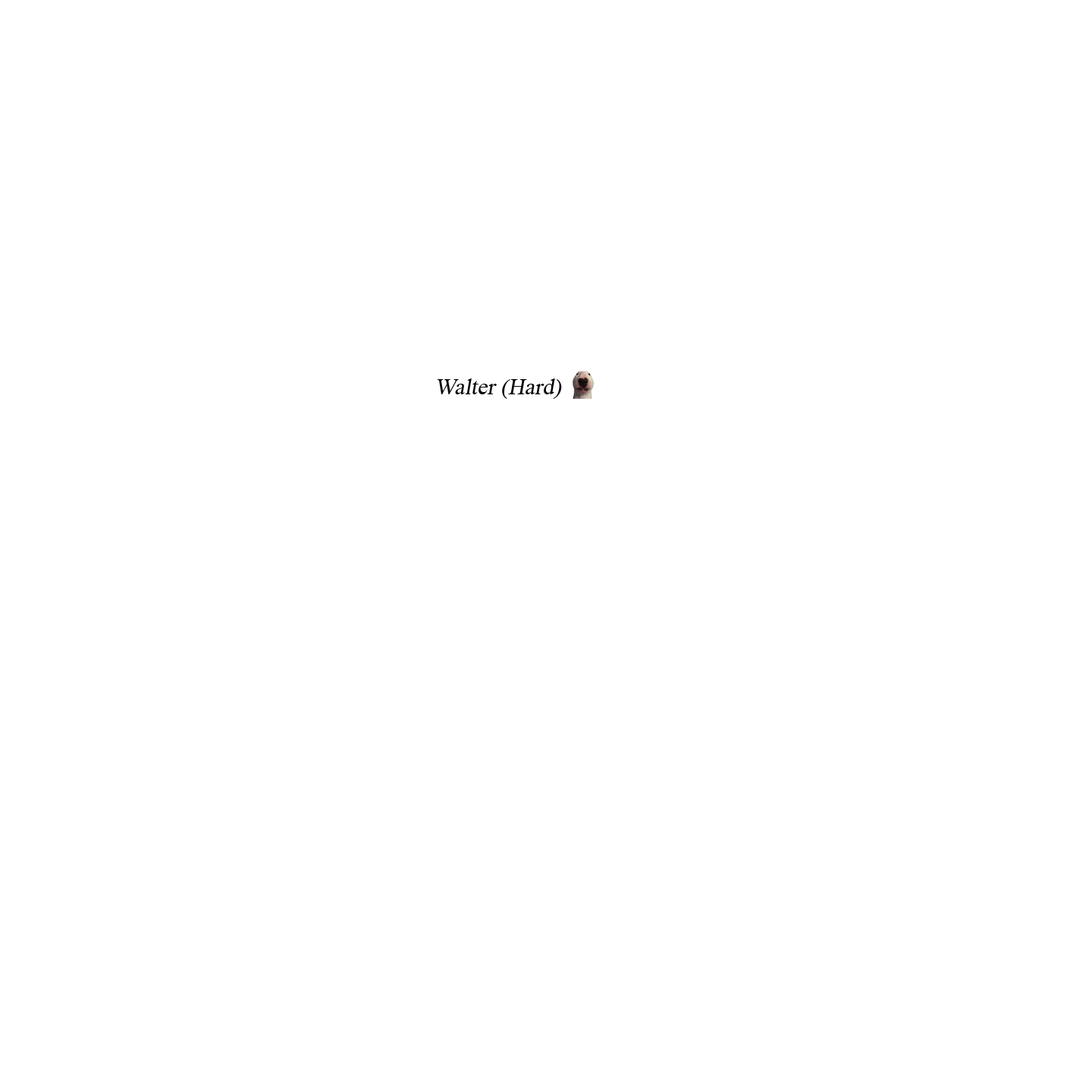
<style>
.page{position:relative;width:1092px;height:1092px;background:#ffffff}
.page>*{position:absolute;margin:0}
.t1{font:22.7px "TimesNewRomanPSMT";color:#040404;font-style:italic}
</style>
<div class="page">
<p class="t1" style="left:438px;top:378px;width:124px;height:21px">Walter (Hard)</p>
</div>
